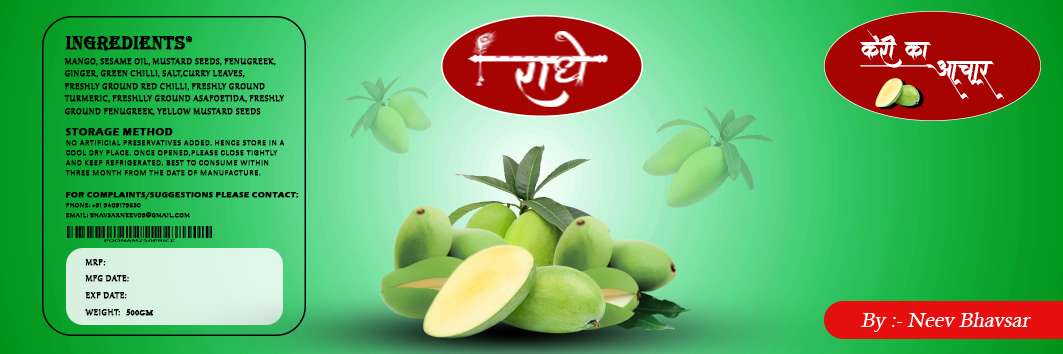
<style>
.page{position:relative;width:1063px;height:354px}
.page>*{position:absolute;margin:0}
.t1{font:20.8px/18.8px "AMSAaditya";color:#ffffff;font-style:italic;text-decoration:underline}
.t2{font:20.8px/18.8px "AMSNirmala";color:#ffffff;font-style:italic}
.t3{font:18.8px "Algerian";color:#000000;text-transform:uppercase;font-weight:bold}
.t4{font:10.4px "Gabriola";color:#000000;text-transform:uppercase;font-weight:bold}
.t5{font:8.3px "Calibri-Light";color:#000000;text-transform:uppercase;font-weight:bold}
.t6{font:10.4px "ErasITC-Bold";color:#000000;text-transform:uppercase;font-weight:bold}
.t7{font:8.3px "Gabriola";color:#000000;text-transform:uppercase;font-weight:bold}
.t8{font:8.3px "ErasITC-Bold";color:#000000;text-transform:uppercase;font-weight:bold}
.t9{font:10.4px/16.7px "Gabriola";color:#000000;text-transform:uppercase;font-weight:bold}
.t10{font:8.3px "BaskOldFace";color:#000000;text-transform:uppercase;font-weight:bold}
.t11{font:20.8px "CalistoMT";color:#ffffff;font-style:italic}
</style>
<div class="page">
<p class="t1" style="left:860px;top:29px;width:144px;height:70px;text-align:justify">kerI ka <br><span class="t2">      Aacaar</span></p>
<p class="t3" style="left:65px;top:36px;width:128px;height:15px">ingREDIENTS*</p>
<p class="t4" style="left:64px;top:58px;width:221px;height:58px">MANGO, SESAME OIL, MUSTARD SEEDS, FENUGREEK, <br>GINGER, GREEN CHILLI, SALT,CURRY LEAVES, <br>FRESHLY GROUND RED CHILLI, FRESHLY GROUND <br>TURMERIC, FRESHLLY GROUND ASAFOETIDA, FRESHLY <br>GROUND FENUGREEK, YELLOW MUSTARD SEEDS</p>
<p class="t5" style="left:65px;top:128px;width:220px;height:48px"><span class="t6">STORAGE METHOD<br></span>No artificial preservatives added. Hence store in a <br>cool dry place. Once opened,please close tightly <br>and keep refrigerated. Best to consume within <br>three month from the date of manufacture.</p>
<p class="t7" style="left:65px;top:192px;width:234px;height:26px"><span class="t8">For Complaints/Suggestions please contact:<br></span>phone: +91 9409179650<br>Email: bhavsarneev09@gmail.com</p>
<p class="t9" style="left:85px;top:259px;width:44px;height:57px">MRP:<br>MFG date:<br>exp date:<br>weight:</p>
<p class="t10" style="left:126px;top:309px;width:27px;height:7px">500gm</p>
<p class="t11" style="left:861px;top:312px;width:170px;height:20px">By :- Neev Bhavsar</p>
</div>
